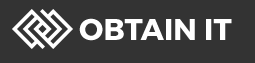
<style>
.page{position:relative;width:255px;height:63px;background:#333333}
.page>*{position:absolute;margin:0}
.t1{font:30px "Montserrat-Bold";color:#ffffff;text-transform:uppercase}
</style>
<div class="page">
<p class="t1" style="left:79px;top:18px;width:153px;height:23px">Obtain it</p>
</div>
